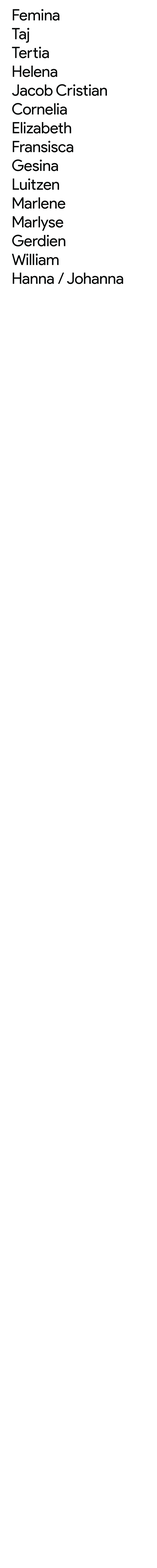
<style>
.page{position:relative;width:157px;height:1568px;background:#ffffff}
.page>*{position:absolute;margin:0}
.t1{font:15.7px "ProductSans-Regular";letter-spacing:-0.01em;color:#070909}
</style>
<div class="page">
<p class="t1" style="left:12px;top:9px;width:111px;height:275px">Femina<br>Taj<br>Tertia<br>Helena<br>Jacob Cristian<br>Cornelia<br>Elizabeth<br>Fransisca<br>Gesina<br>Luitzen<br>Marlene<br>Marlyse<br>Gerdien<br>William<br>Hanna / Johanna</p>
</div>
